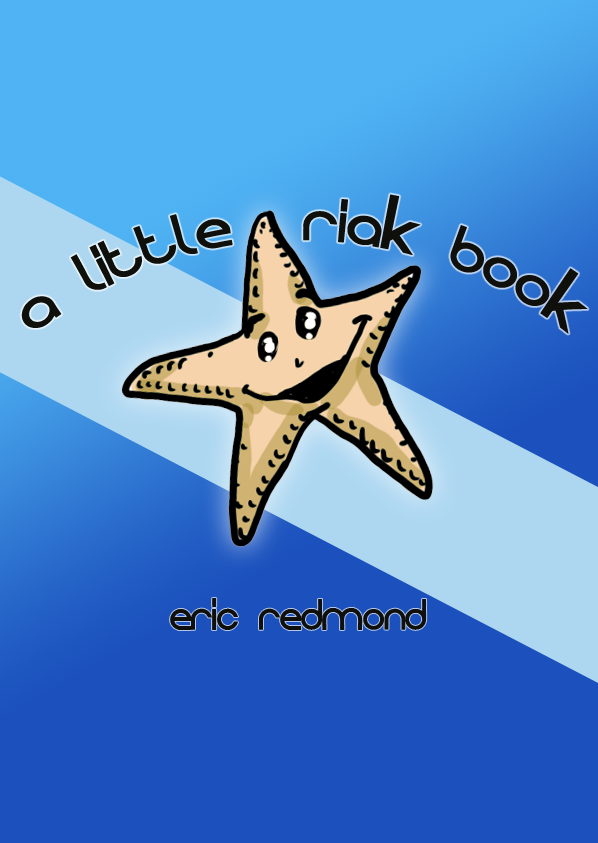
<style>
.page{position:relative;width:598px;height:843px}
.page>*{position:absolute;margin:0}
.t1{font:58.3px/0px "Evolution";letter-spacing:0.02em;color:#0f0f0b}
.t2{font:41.7px "Evolution";color:#0f0f0b}
</style>
<div class="page">
<p class="t1" style="left:21px;top:194px;width:567px;height:140px;text-align:center">A Little  riak Book</p>
<p class="t2" style="left:170px;top:598px;width:257px;height:32px">Eric Redmond</p>
</div>
